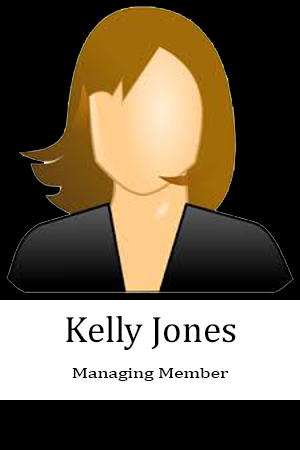
<style>
.page{position:relative;width:300px;height:450px;background:#000000}
.page>*{position:absolute;margin:0}
.t1{font:37.3px "Cambria";color:#000000}
.t2{font:15.2px "Cambria";color:#000000;scale:1.29 1}
</style>
<div class="page">
<p class="t1" style="left:66px;top:316px;width:170px;height:34px">Kelly Jones</p>
<p class="t2" style="left:72px;top:368px;width:157px;height:13px">Managing Member</p>
</div>
